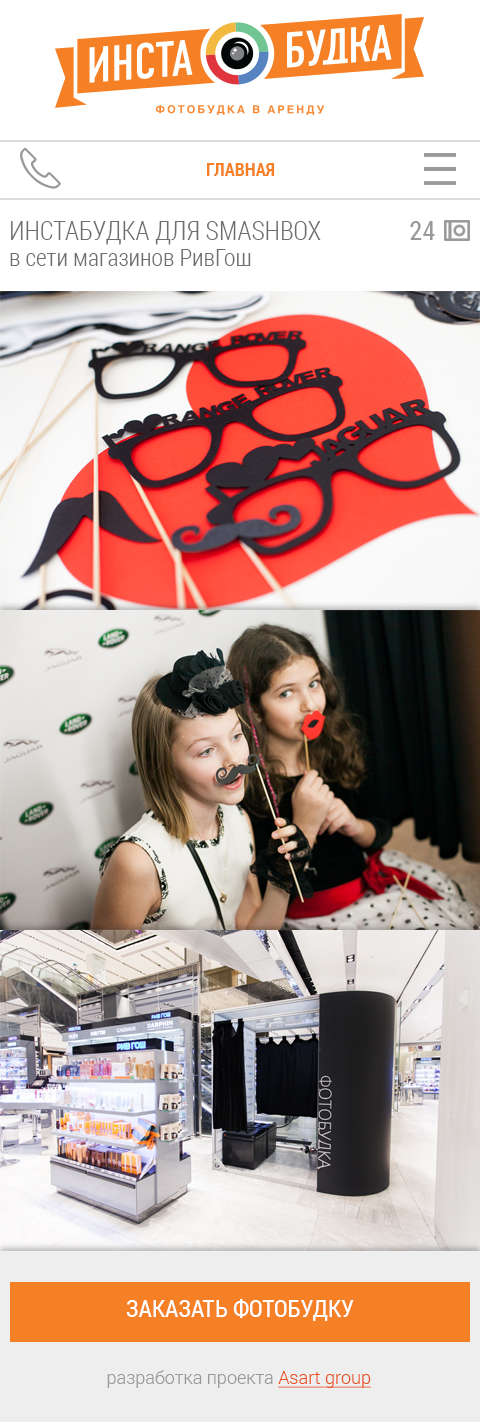
<style>
.page{position:relative;width:480px;height:1422px}
.page>*{position:absolute;margin:0}
.t1{font:18px "RobotoCondensed-Bold";color:#f58026}
.t2{font:26px "RobotoCondensed-Light";color:#6e6e6e;text-transform:uppercase}
.t3{font:26px "RobotoCondensed-Regular";color:#999999;text-transform:uppercase}
.t4{font:24px "RobotoCondensed-Light";color:#6e6e6e}
.t5{font:24px "RobotoCondensed-Regular";color:#ffffff;text-transform:uppercase}
.t6{font:18px "Roboto-Light";color:#999999}
.t7{font:18px "Roboto-Light";color:#e94e1b;text-decoration:underline}
</style>
<div class="page">
<p class="t1" style="left:207px;top:163px;width:68px;height:13px">ГЛАВНАЯ</p>
<p class="t2" style="left:11px;top:221px;width:310px;height:24px">Инстабудка для smashbox</p>
<p class="t3" style="left:410px;top:221px;width:25px;height:19px">24</p>
<p class="t4" style="left:10px;top:249px;width:241px;height:17px">в сети магазинов РивГош</p>
<p class="t5" style="left:126px;top:1299px;width:228px;height:22px">заказать фотобудку</p>
<p class="t6" style="left:107px;top:1370px;width:265px;height:18px">разработка проекта <span class="t7">Asart group</span></p>
</div>
